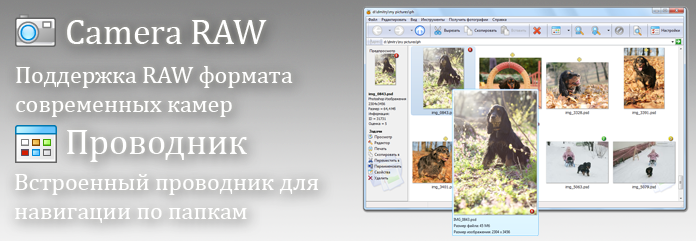
<style>
.page{position:relative;width:696px;height:241px}
.page>*{position:absolute;margin:0}
.t1{font:36px "CambriaMath";color:#ffffff}
.t2{font:24px "CambriaMath";color:#ffffff}
</style>
<div class="page">
<p class="t1" style="left:67px;top:20px;width:200px;height:24px">Camera RAW</p>
<p class="t2" style="left:16px;top:66px;width:277px;height:51px">Поддержка RAW формата современных камер</p>
<p class="t1" style="left:67px;top:130px;width:180px;height:32px">Проводник</p>
<p class="t2" style="left:15px;top:174px;width:304px;height:49px">Встроенный проводник для навигации по папкам</p>
</div>
